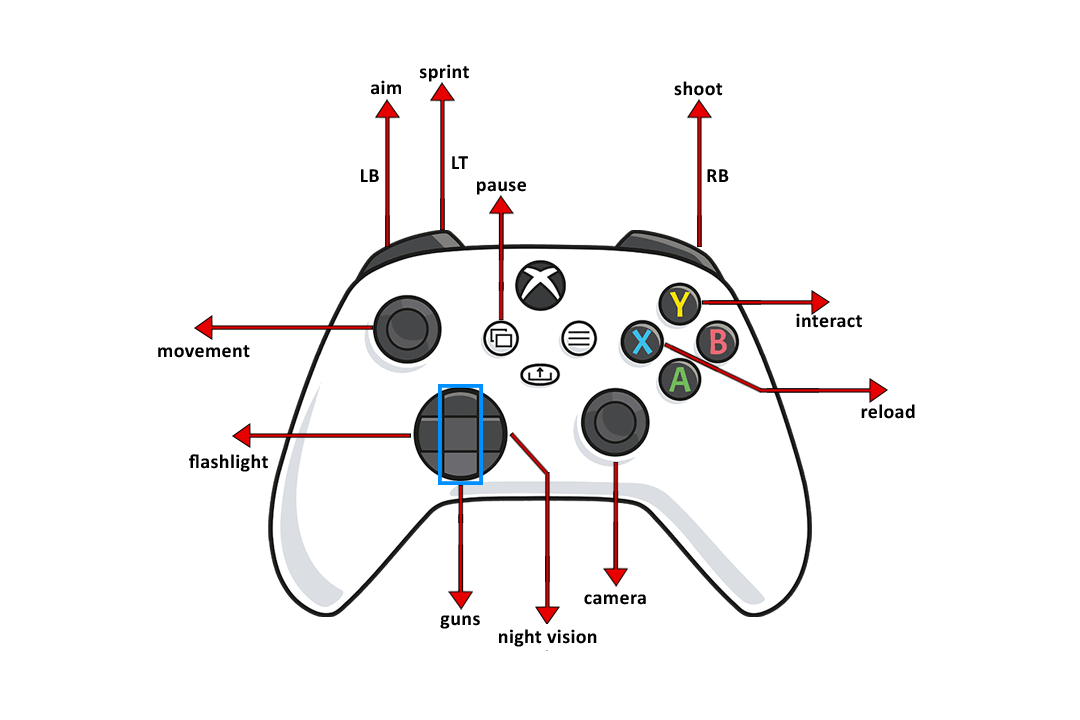
<style>
.page{position:relative;width:1080px;height:720px;background:#ffffff}
.page>*{position:absolute;margin:0}
.t1{font:20px "Calibri-Bold";letter-spacing:0.02em;color:#000000}
</style>
<div class="page">
<p class="t1" style="left:420px;top:64px;width:49px;height:18px">sprint</p>
<p class="t1" style="left:371px;top:80px;width:30px;height:15px">aim</p>
<p class="t1" style="left:674px;top:81px;width:49px;height:15px">shoot</p>
<p class="t1" style="left:452px;top:156px;width:16px;height:13px">LT</p>
<p class="t1" style="left:361px;top:169px;width:18px;height:13px">LB</p>
<p class="t1" style="left:707px;top:169px;width:22px;height:13px">RB</p>
<p class="t1" style="left:477px;top:181px;width:49px;height:14px">pause</p>
<p class="t1" style="left:796px;top:313px;width:66px;height:15px">interact</p>
<p class="t1" style="left:158px;top:345px;width:92px;height:13px">movement</p>
<p class="t1" style="left:861px;top:404px;width:54px;height:15px">reload</p>
<p class="t1" style="left:189px;top:454px;width:79px;height:18px">flashlight</p>
<p class="t1" style="left:584px;top:594px;width:62px;height:11px">camera</p>
<p class="t1" style="left:440px;top:615px;width:40px;height:14px">guns</p>
<p class="t1" style="left:499px;top:629px;width:98px;height:18px">night vision</p>
</div>
